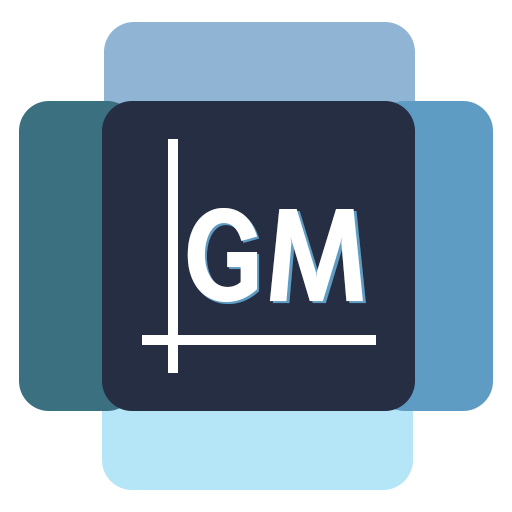
<style>
.page{position:relative;width:512px;height:512px;background:#262e44}
.page>*{position:absolute;margin:0}
.t1{font:168.7px "AwanZaman-Bold";color:#ffffff}
</style>
<div class="page">
<p class="t1" style="left:187px;top:208px;width:176px;height:94px">GM</p>
<p class="t1" style="left:189px;top:210px;width:177px;height:94px">GM</p>
</div>
